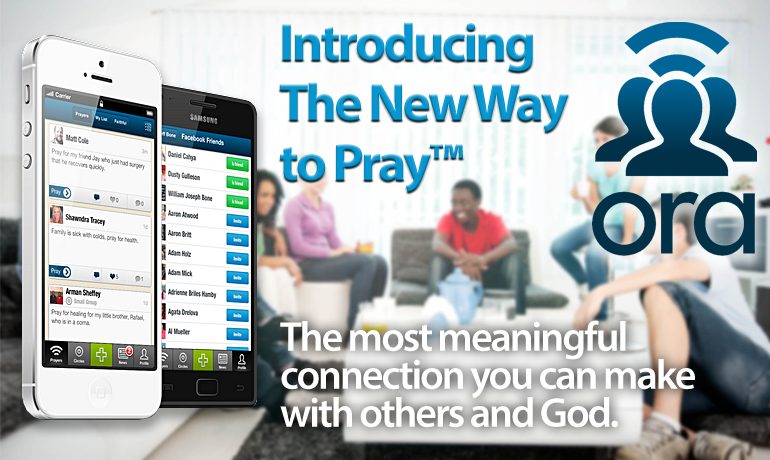
<style>
.page{position:relative;width:770px;height:460px}
.page>*{position:absolute;margin:0}
.t1{font:54px/60px "MyriadPro-Bold";letter-spacing:-0.05em;color:#0796d0}
.t2{font:42px/38px "MyriadPro-Semibold";letter-spacing:-0.05em;color:#ffffff}
</style>
<div class="page">
<p class="t1" style="left:279px;top:22px;width:290px;height:171px">Introducing<br>The New Way<br>to Pray™</p>
<p class="t2" style="left:280px;top:320px;width:415px;height:108px">The most meaningful connection you can make with others and God.</p>
</div>
